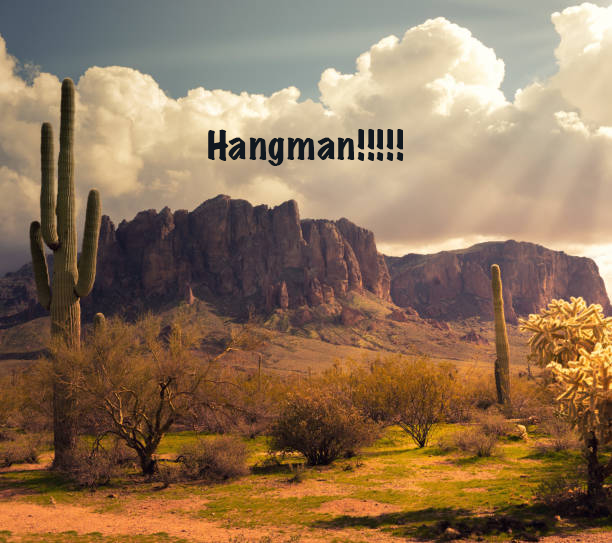
<style>
.page{position:relative;width:612px;height:543px}
.page>*{position:absolute;margin:0}
.t1{font:36px "MarkerFelt-Wide";color:#101820}
</style>
<div class="page">
<p class="t1" style="left:208px;top:129px;width:196px;height:37px">Hangman!!!!!</p>
</div>
